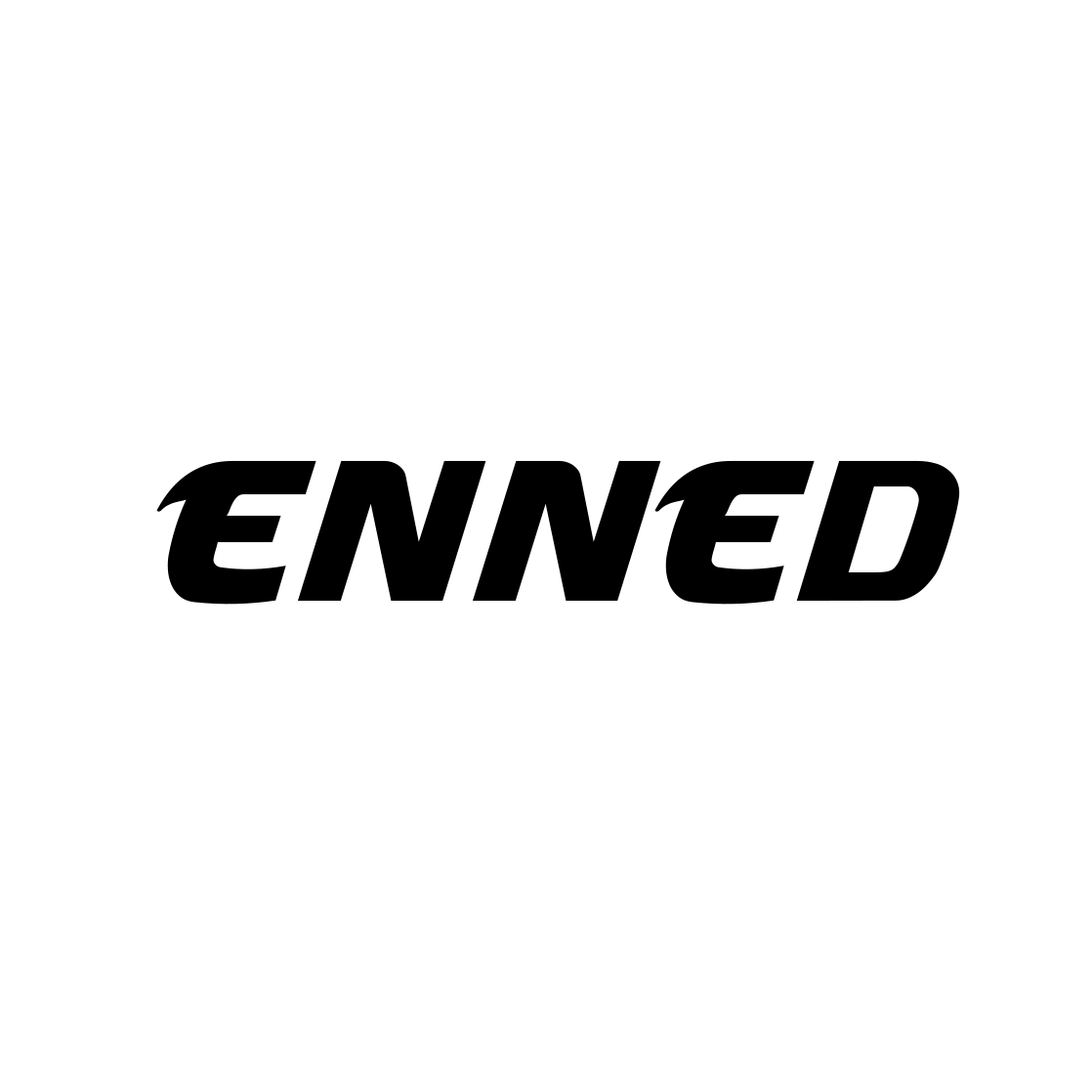
<style>
.page{position:relative;width:1092px;height:1092px;background:#ffffff}
.page>*{position:absolute;margin:0}
.t1{font:187.8px "Masque";color:#000000}
</style>
<div class="page">
<p class="t1" style="left:156px;top:460px;width:804px;height:145px">Enned</p>
</div>
